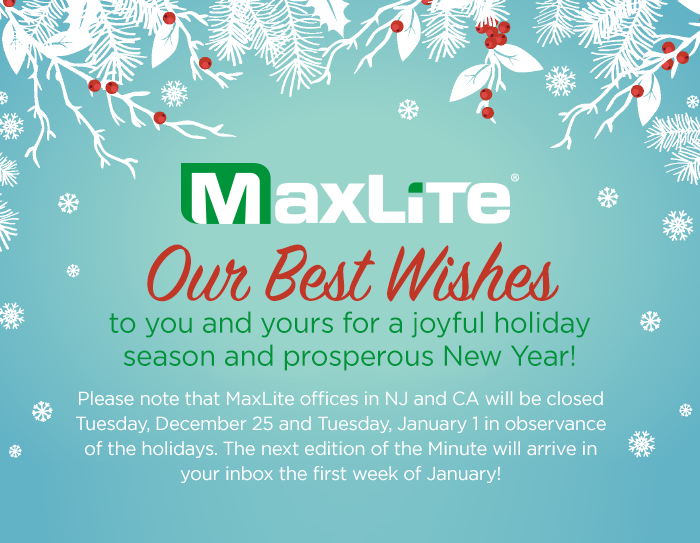
<style>
.page{position:relative;width:700px;height:543px}
.page>*{position:absolute;margin:0}
.t1{font:29.1px/33px "Gotham-Book";letter-spacing:-0.01em;color:#00943a;scale:0.95 1}
.t2{font:88.1px/37px "SignPainter-HouseScript";letter-spacing:-0.01em;color:#c03627;scale:0.95 1}
.t3{font:19.1px/25.1px "Gotham-Book";letter-spacing:-0.01em;color:#ffffff;scale:0.95 1}
</style>
<div class="page">
<p class="t1" style="left:109px;top:241px;width:482px;height:130px;text-align:center"><span class="t2">Our Best Wishes<br></span>to you and yours for a joyful holiday season and prosperous New Year!</p>
<p class="t3" style="left:76px;top:391px;width:530px;height:92px;text-align:center">Please note that MaxLite offices in NJ and CA will be closed Tuesday, December 25 and Tuesday, January 1 in observance of the holidays. The next edition of the Minute will arrive in your inbox the first week of January!</p>
</div>
